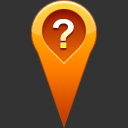
<style>
.page{position:relative;width:128px;height:128px;background:#333333}
.page>*{position:absolute;margin:0}
.t1{font:40px "Arial-BoldMT"}
</style>
<div class="page">
<p class="t1" style="left:53px;top:19px;width:21px;height:29px">?</p>
</div>
